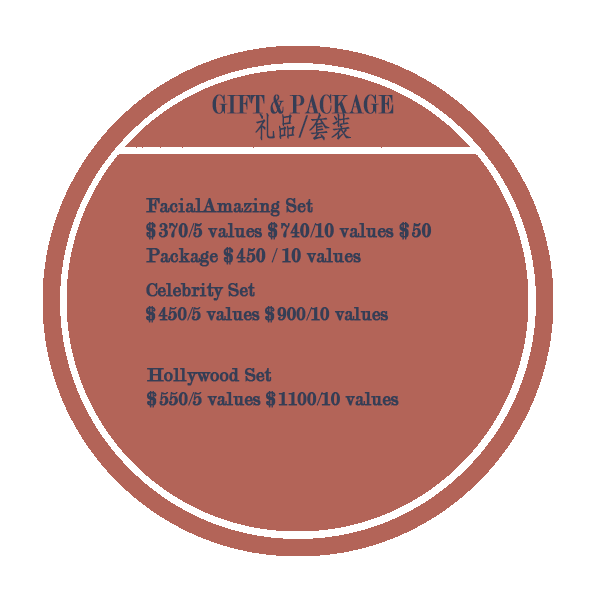
<style>
.page{position:relative;width:600px;height:600px;background:#b36458}
.page>*{position:absolute;margin:0}
.t1{font:28.2px/24px "Modern-Regular";color:#353e55;font-weight:bold;scale:0.76 1}
.t2{font:28.2px/24px "AdobeFangsongStd-Regular";color:#353e55;font-weight:bold;scale:0.76 1}
.t3{font:20.7px "Modern-Regular";color:#353e55;font-weight:bold}
.t4{font:20px "Modern-Regular";color:#353e55;font-weight:bold}
</style>
<div class="page">
<p class="t1" style="left:212px;top:94px;width:182px;height:47px">GIFT &amp; PACKAGE <br>       <span class="t2">礼品/套装</span></p>
<p class="t3" style="left:146px;top:198px;width:286px;height:69px">FacialAmazing Set <br>$370/5 values $740/10 values $50<br>Package $450 / 10 values</p>
<p class="t4" style="left:145px;top:283px;width:244px;height:40px">Celebrity Set<br>$450/5 values $900/10 values</p>
<p class="t4" style="left:146px;top:368px;width:253px;height:40px">Hollywood Set<br>$550/5 values $1100/10 values</p>
</div>
